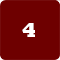
<style>
.page{position:relative;width:60px;height:60px;background:#6e0000}
.page>*{position:absolute;margin:0}
.t1{font:20.8px "Rockwell-ExtraBold";color:#ffffff}
</style>
<div class="page">
<p class="t1" style="left:22px;top:23px;width:13px;height:14px">4</p>
</div>
